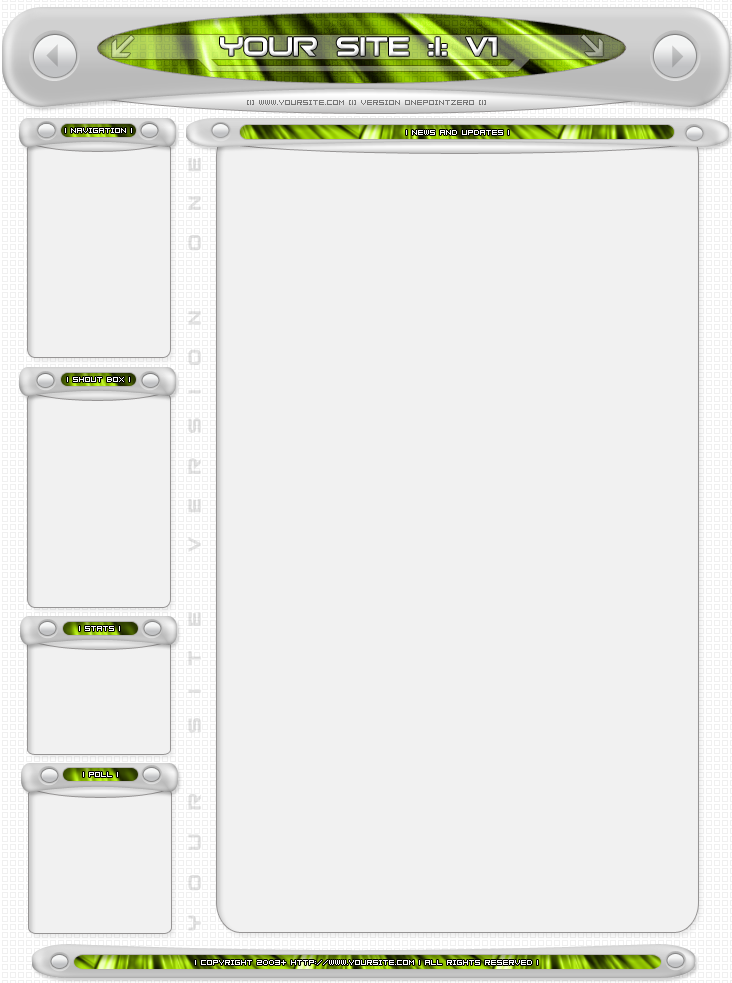
<style>
.page{position:relative;width:732px;height:983px;background:#f1f1f1}
.page>*{position:absolute;margin:0}
.t1{font:36px "Bitsumishi";color:#ffffff}
.t2{font:8px "04b08";color:#787878}
.t3{font:8px "04b08";color:#ffffff}
.t4{font:24px "Bitsumishi";color:#e3e3e3}
</style>
<div class="page">
<p class="t1" style="left:220px;top:37px;width:277px;height:19px">your site :I: V1</p>
<p class="t2" style="left:247px;top:100px;width:239px;height:5px">[|] www.yoursite.com [|] version onepointzero [|]</p>
<p class="t3" style="left:65px;top:128px;width:67px;height:5px">| navigation |</p>
<p class="t3" style="left:406px;top:130px;width:103px;height:5px">| News And Updates |</p>
<p class="t4" style="left:188px;top:158px;width:13px;height:773px;rotate:-90deg">y  o  u  r     s  i  t  e     v  e  r  s  i  o  n     o  n  e</p>
<p class="t3" style="left:67px;top:377px;width:63px;height:5px">| Shout Box |</p>
<p class="t3" style="left:79px;top:626px;width:41px;height:5px">| Stats |</p>
<p class="t3" style="left:83px;top:772px;width:35px;height:5px">| Poll |</p>
<p class="t3" style="left:195px;top:960px;width:343px;height:5px">| copyright 2003+ http://www.yoursite.com | All rights reserved |</p>
</div>
